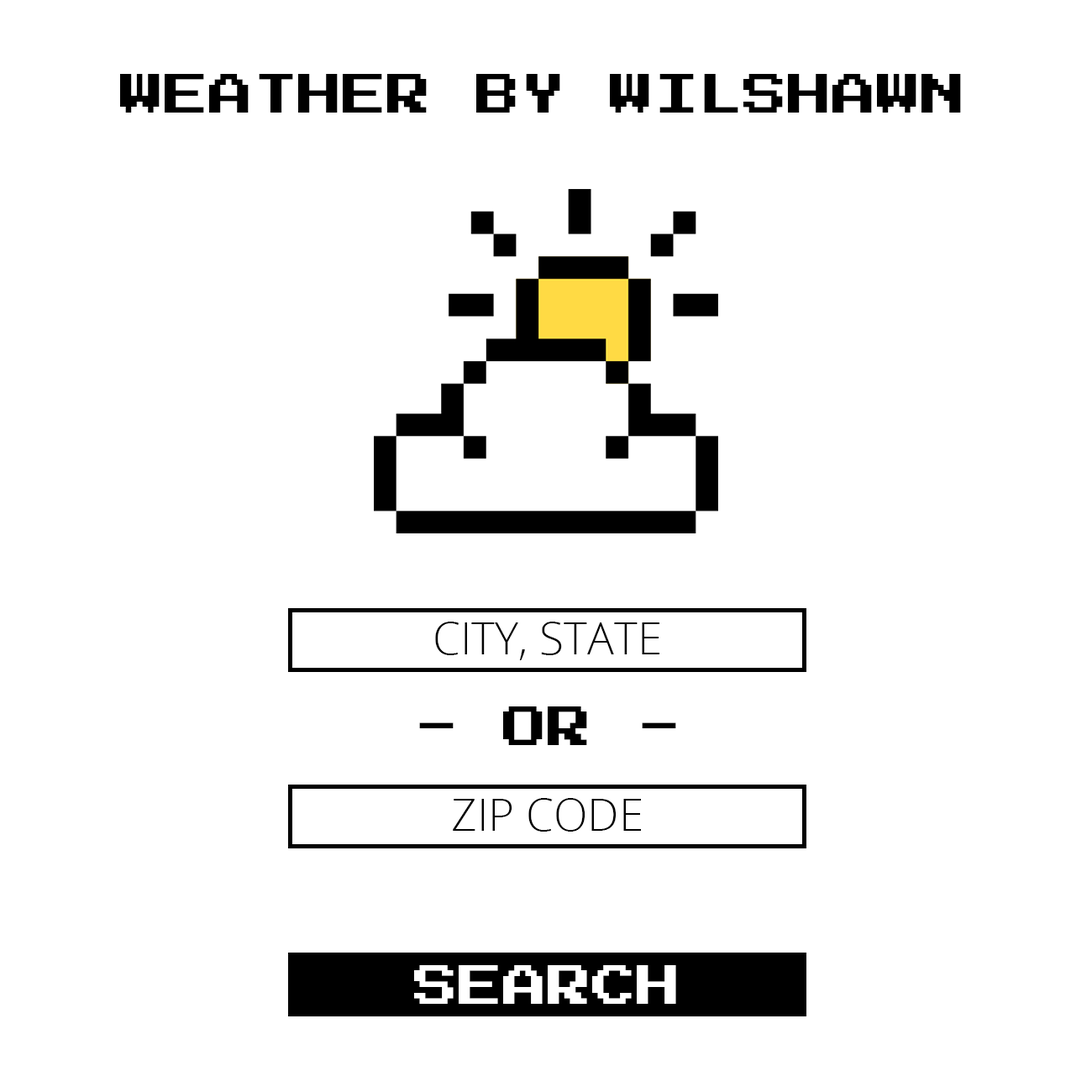
<style>
.page{position:relative;width:1092px;height:1092px;background:#ffffff}
.page>*{position:absolute;margin:0}
.t1{font:44.5px "PressStart2P-Regular";color:#000000;text-transform:uppercase}
.t2{font:44.5px "OpenSans-Light";color:#000000;text-transform:uppercase}
.t3{font:44.5px "PressStart2P-Regular";color:#ffffff;text-transform:uppercase}
</style>
<div class="page">
<p class="t1" style="left:120px;top:74px;width:841px;height:39px">weather by wilshawn</p>
<p class="t2" style="left:435px;top:622px;width:224px;height:38px">city, State</p>
<p class="t1" style="left:419px;top:706px;width:257px;height:39px">- or -</p>
<p class="t2" style="left:453px;top:798px;width:188px;height:34px">zip code</p>
<p class="t3" style="left:414px;top:965px;width:262px;height:39px">search</p>
</div>
